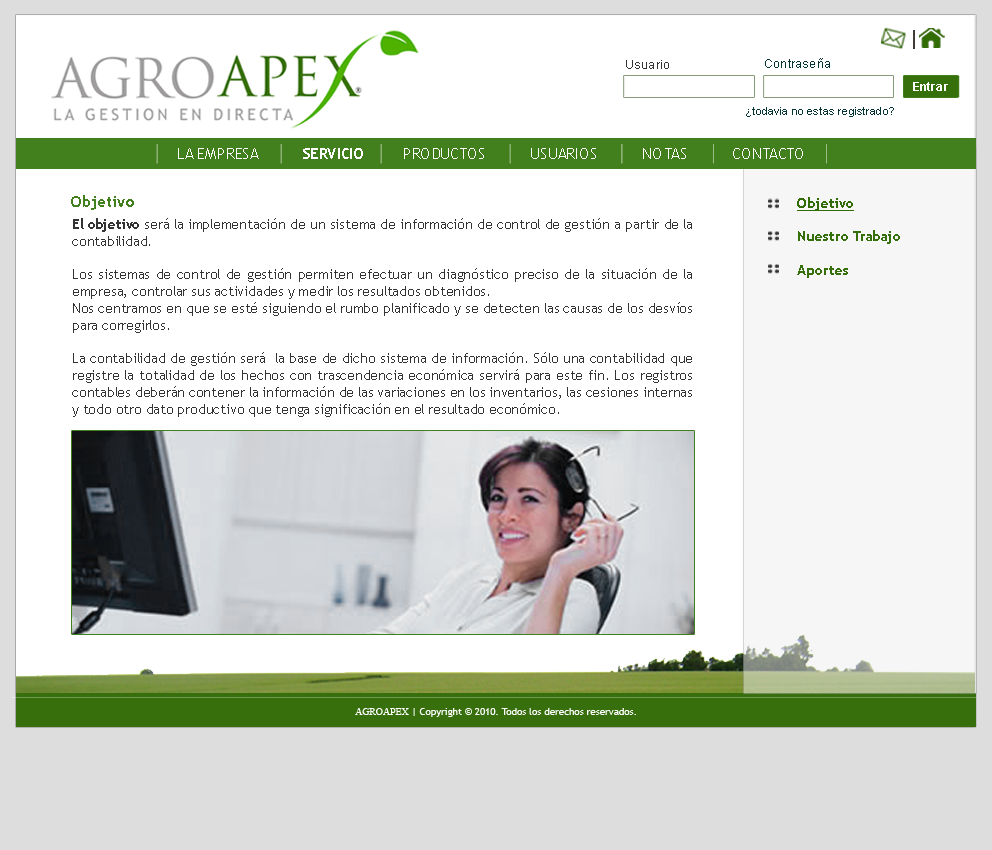
<style>
.page{position:relative;width:992px;height:850px;background:#ffffff}
.page>*{position:absolute;margin:0}
.t1{font:12px "ArialMT";color:#333333}
.t2{font:12px "ArialMT";color:#033333}
.t3{font:12px "Arial-BoldMT";color:#ffffff}
.t4{font:11px "ArialMT";color:#033333}
.t5{font:15px "TrebuchetMS";color:#ffffff;text-transform:uppercase}
.t6{font:15px "TrebuchetMS-Bold";color:#ffffff;text-transform:uppercase}
.t7{font:16px "TrebuchetMS-Bold";color:#42801d}
.t8{font:14px "TrebuchetMS-Bold";color:#36700b}
.t9{font:14px "TrebuchetMS-Bold";color:#326c05;text-decoration:underline}
.t10{font:14px "TrebuchetMS-Bold";color:#37700b}
.t11{font:14px "TrebuchetMS";color:#333333}
.t12{font:14px "TrebuchetMS-Bold";color:#333333}
.t13{font:10.3px "TrebuchetMS";color:#ffffff;scale:0.95 1}
.t14{font:10.3px "TimesNewRomanPSMT";color:#ffffff;scale:0.95 1}
</style>
<div class="page">
<p class="t1" style="left:626px;top:60px;width:43px;height:9px">Usuario</p>
<p class="t2" style="left:765px;top:58px;width:65px;height:10px">Contraseña</p>
<p class="t3" style="left:913px;top:82px;width:35px;height:9px">Entrar</p>
<p class="t4" style="left:746px;top:107px;width:148px;height:10px">¿todavia no estas registrado?</p>
<p class="t5" style="left:178px;top:148px;width:625px;height:11px">LA EMPRESA         <span class="t6">SERVICIO</span>        PRODUCTOS         USUARIOS         NOTAS         CONTACTO</p>
<p class="t7" style="left:71px;top:195px;width:63px;height:15px">Objetivo</p>
<p class="t8" style="left:797px;top:197px;width:103px;height:81px"><span class="t9">Objetivo <br><br></span>Nuestro Trabajo <br><br><span class="t10">Aportes</span></p>
<p class="t11" style="left:72px;top:218px;width:620px;height:199px;text-align:justify"><span class="t12">El objetivo </span>será la implementación de un sistema de información de control de gestión a partir de la contabilidad. <br><br>Los sistemas de control de gestión permiten efectuar un diagnóstico preciso de la situación de la empresa, controlar sus actividades y medir los resultados obtenidos. <br>Nos centramos en que se esté siguiendo el rumbo planificado y se detecten las causas de los desvíos para corregirlos.<br><br>La contabilidad de gestión será  la base de dicho sistema de información. Sólo una contabilidad que registre la totalidad de los hechos con trascendencia económica servirá para este fin. Los registros contables deberán contener la información de las variaciones en los inventarios, las cesiones internas y todo otro dato productivo que tenga significación en el resultado económico.</p>
<p class="t13" style="left:355px;top:708px;width:281px;height:9px"><span class="t14">AGROAPEX</span> | Copyright © 2010. Todos los derechos reservados.</p>
</div>
